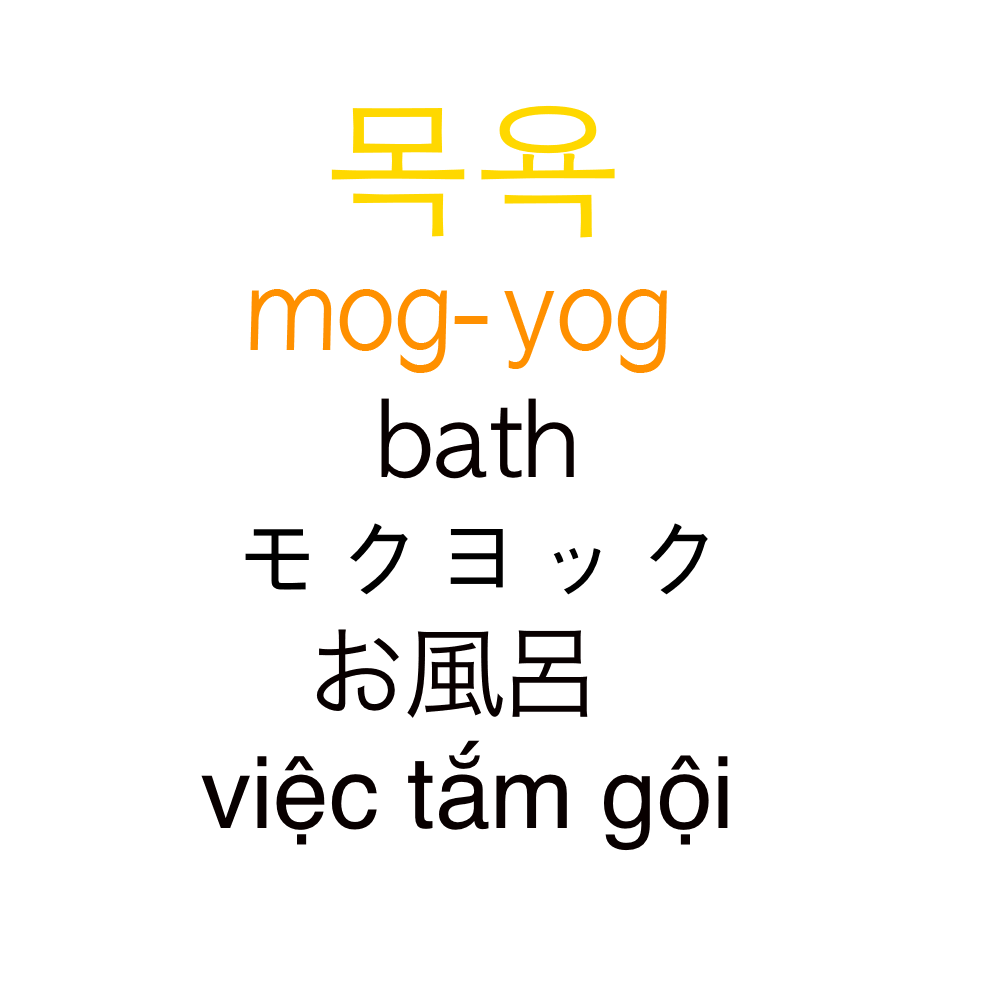
<style>
.page{position:relative;width:1000px;height:1000px;background:#ffffff}
.page>*{position:absolute;margin:0}
.t1{font:150px "AppleGothic";color:#ffd800}
.t2{font:111.2px "AppleGothic";color:#ff9000;scale:0.9 1}
.t3{font:100px "AppleGothic";color:#080000}
.t4{font:100px "AppleGothic";color:#000000}
.t5{font:100px "HiraKakuProN-W3";color:#080000}
.t6{font:100px "Helvetica";color:#080000}
</style>
<div class="page">
<p class="t1" style="left:331px;top:105px;width:284px;height:133px">목욕</p>
<p class="t2" style="left:250px;top:289px;width:417px;height:84px">mog-yog</p>
<p class="t3" style="left:381px;top:398px;width:193px;height:81px">bath</p>
<p class="t4" style="left:245px;top:523px;width:463px;height:72px">モクヨック</p>
<p class="t5" style="left:316px;top:629px;width:272px;height:89px">お風呂</p>
<p class="t6" style="left:201px;top:740px;width:527px;height:111px">việc tắm gội</p>
</div>
